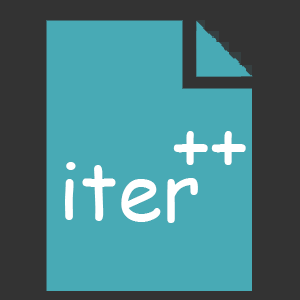
<style>
.page{position:relative;width:300px;height:300px;background:#48aab5}
.page>*{position:absolute;margin:0}
.t1{font:80px "ComicSansMS";color:#ffffff}
</style>
<div class="page">
<p class="t1" style="left:173px;top:131px;width:73px;height:34px">++</p>
<p class="t1" style="left:65px;top:162px;width:133px;height:61px">iter</p>
</div>
